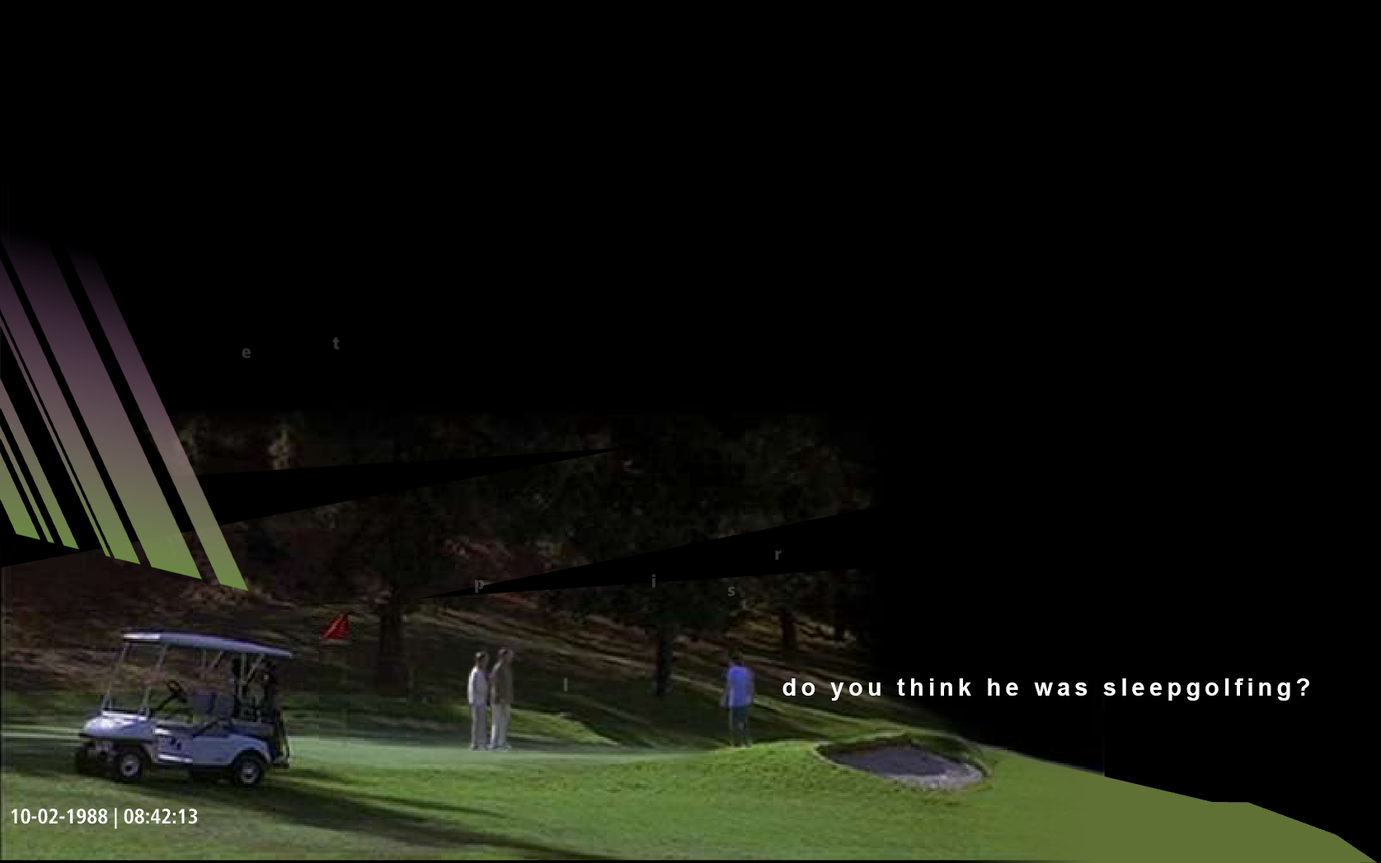
<style>
.page{position:relative;width:1381px;height:863px;background:#000000}
.page>*{position:absolute;margin:0}
.t1{font:23.9px "Arial-BoldMT";letter-spacing:0.18em;color:#fcfcfc}
</style>
<div class="page">
<p class="t1" style="left:783px;top:679px;width:526px;height:22px">do you think he was sleepgolfing?</p>
</div>
